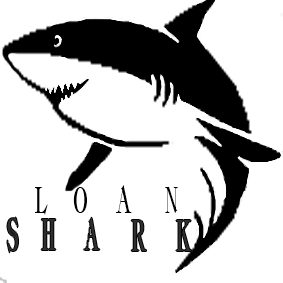
<style>
.page{position:relative;width:283px;height:283px;background:#ffffff}
.page>*{position:absolute;margin:0}
.t1{font:37.8px "Classica-Heavy-Regular";color:#000000;scale:0.5 1}
.t2{font:44.6px "Classica-Heavy-Regular";color:#2f2f2f;scale:0.41 1}
</style>
<div class="page">
<p class="t1" style="left:35px;top:185px;width:143px;height:30px">LOAN</p>
<p class="t2" style="left:7px;top:217px;width:185px;height:36px">SHARK</p>
</div>
